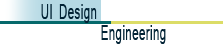
<style>
.page{position:relative;width:223px;height:46px;background:#ffffff}
.page>*{position:absolute;margin:0}
.t1{font:20px "Mangal";letter-spacing:0.025em;color:#022335;scale:0.57 1}
</style>
<div class="page">
<p class="t1" style="left:41px;top:4px;width:56px;height:19px">UI Design</p>
<p class="t1" style="left:101px;top:25px;width:65px;height:19px">Engineering</p>
</div>
